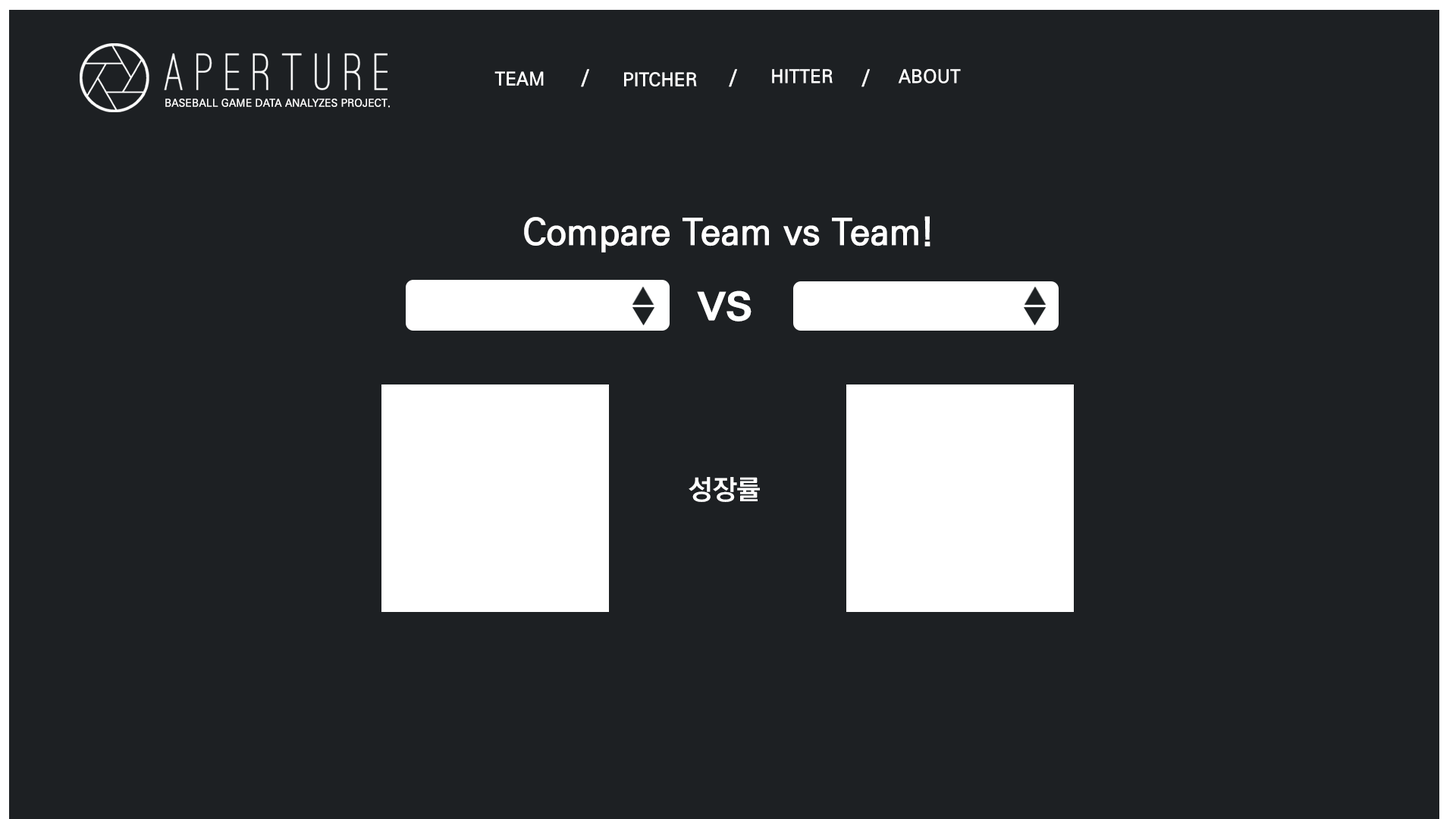
<style>
.page{position:relative;width:1456px;height:819px;background:#1d2023}
.page>*{position:absolute;margin:0}
.t1{font:18.2px "KoPubDotumPB";letter-spacing:0.01em;color:#ffffff}
.t2{font:10.6px "KoPubDotumPB";letter-spacing:0.01em;color:#ffffff}
.t3{font:36.5px "KoPubDotumPB";letter-spacing:0.01em;color:#ffffff}
.t4{font:54.6px "KoPubDotumPB";letter-spacing:0.01em;color:#ffffff}
.t5{font:27.3px "KoPubDotumPB";letter-spacing:0.01em;color:#ffffff}
</style>
<div class="page">
<p class="t1" style="left:494px;top:71px;width:50px;height:15px">TEAM</p>
<p class="t1" style="left:581px;top:69px;width:8px;height:18px">/</p>
<p class="t1" style="left:624px;top:72px;width:73px;height:14px">PITCHER</p>
<p class="t1" style="left:729px;top:69px;width:8px;height:18px">/</p>
<p class="t1" style="left:772px;top:69px;width:61px;height:14px">HITTER</p>
<p class="t1" style="left:861px;top:69px;width:9px;height:18px">/</p>
<p class="t1" style="left:898px;top:69px;width:63px;height:14px">ABOUT</p>
<p class="t2" style="left:165px;top:99px;width:225px;height:9px">BASEBALL GAME DATA ANALYZES PROJECT.</p>
<p class="t3" style="left:524px;top:216px;width:406px;height:37px">Compare Team vs Team!</p>
<p class="t4" style="left:697px;top:290px;width:54px;height:32px">vs</p>
<p class="t5" style="left:689px;top:477px;width:71px;height:25px">성장률</p>
</div>
